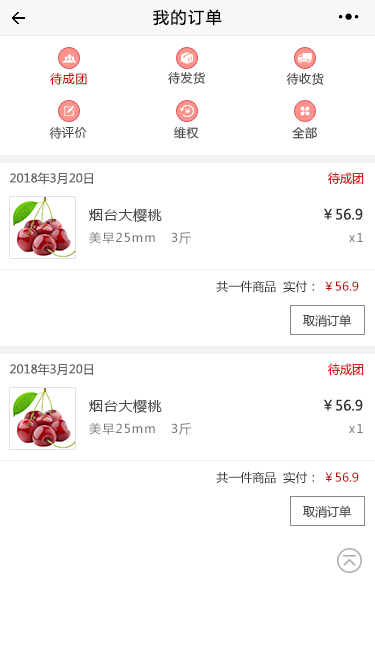
<style>
.page{position:relative;width:375px;height:667px;background:#ffffff}
.page>*{position:absolute;margin:0}
.t1{font:16px "MicrosoftYaHei";letter-spacing:0.1em;color:#020202}
.t2{font:12px "MicrosoftYaHei";letter-spacing:0.05em;color:#ca0000}
.t3{font:12px "MicrosoftYaHei";letter-spacing:0.05em;color:#454545}
.t4{font:12px "MicrosoftYaHei";color:#646464}
.t5{font:12px "MicrosoftYaHei";color:#d51d1d}
.t6{font:14px "MicrosoftYaHei";letter-spacing:0.05em;color:#454545}
.t7{font:14px "MicrosoftYaHei";color:#363636}
.t8{font:12px "MicrosoftYaHei";letter-spacing:0.1em;color:#747474}
.t9{font:12px "MicrosoftYaHei";color:#333333}
.t10{font:12px "MicrosoftYaHei";color:#c20303}
.t11{font:12px "MicrosoftYaHei";letter-spacing:0.001em;color:#454545}
</style>
<div class="page">
<p class="t1" style="left:153px;top:9px;width:69px;height:17px">我的订单</p>
<p class="t2" style="left:50px;top:72px;width:37px;height:13px">待成团</p>
<p class="t3" style="left:168px;top:71px;width:38px;height:13px">待发货</p>
<p class="t3" style="left:286px;top:72px;width:38px;height:13px">待收货</p>
<p class="t3" style="left:49px;top:126px;width:38px;height:13px">待评价</p>
<p class="t3" style="left:174px;top:126px;width:25px;height:13px">维权</p>
<p class="t3" style="left:292px;top:127px;width:25px;height:12px">全部</p>
<p class="t4" style="left:10px;top:172px;width:83px;height:13px">2018年3月20日</p>
<p class="t5" style="left:328px;top:172px;width:36px;height:13px">待成团</p>
<p class="t6" style="left:89px;top:208px;width:73px;height:14px">烟台大樱桃</p>
<p class="t7" style="left:324px;top:208px;width:39px;height:12px">￥56.9</p>
<p class="t8" style="left:89px;top:232px;width:102px;height:12px">美早25mm   3斤</p>
<p class="t8" style="left:349px;top:232px;width:14px;height:10px">x1</p>
<p class="t9" style="left:216px;top:280px;width:143px;height:13px">共一件商品  实付： <span class="t10">￥56.9</span></p>
<p class="t11" style="left:303px;top:314px;width:49px;height:13px">取消订单</p>
<p class="t4" style="left:10px;top:363px;width:83px;height:13px">2018年3月20日</p>
<p class="t5" style="left:328px;top:363px;width:36px;height:13px">待成团</p>
<p class="t6" style="left:89px;top:399px;width:73px;height:14px">烟台大樱桃</p>
<p class="t7" style="left:324px;top:399px;width:39px;height:12px">￥56.9</p>
<p class="t8" style="left:89px;top:423px;width:102px;height:12px">美早25mm   3斤</p>
<p class="t8" style="left:349px;top:423px;width:14px;height:10px">x1</p>
<p class="t9" style="left:216px;top:471px;width:143px;height:13px">共一件商品  实付： <span class="t10">￥56.9</span></p>
<p class="t11" style="left:303px;top:505px;width:49px;height:13px">取消订单</p>
</div>
